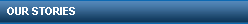
<style>
.page{position:relative;width:248px;height:24px}
.page>*{position:absolute;margin:0}
.t1{font:10.5px "Arial-BoldMT";color:#ffffff}
</style>
<div class="page">
<p class="t1" style="left:7px;top:7px;width:68px;height:8px">OUR STORIES</p>
</div>
